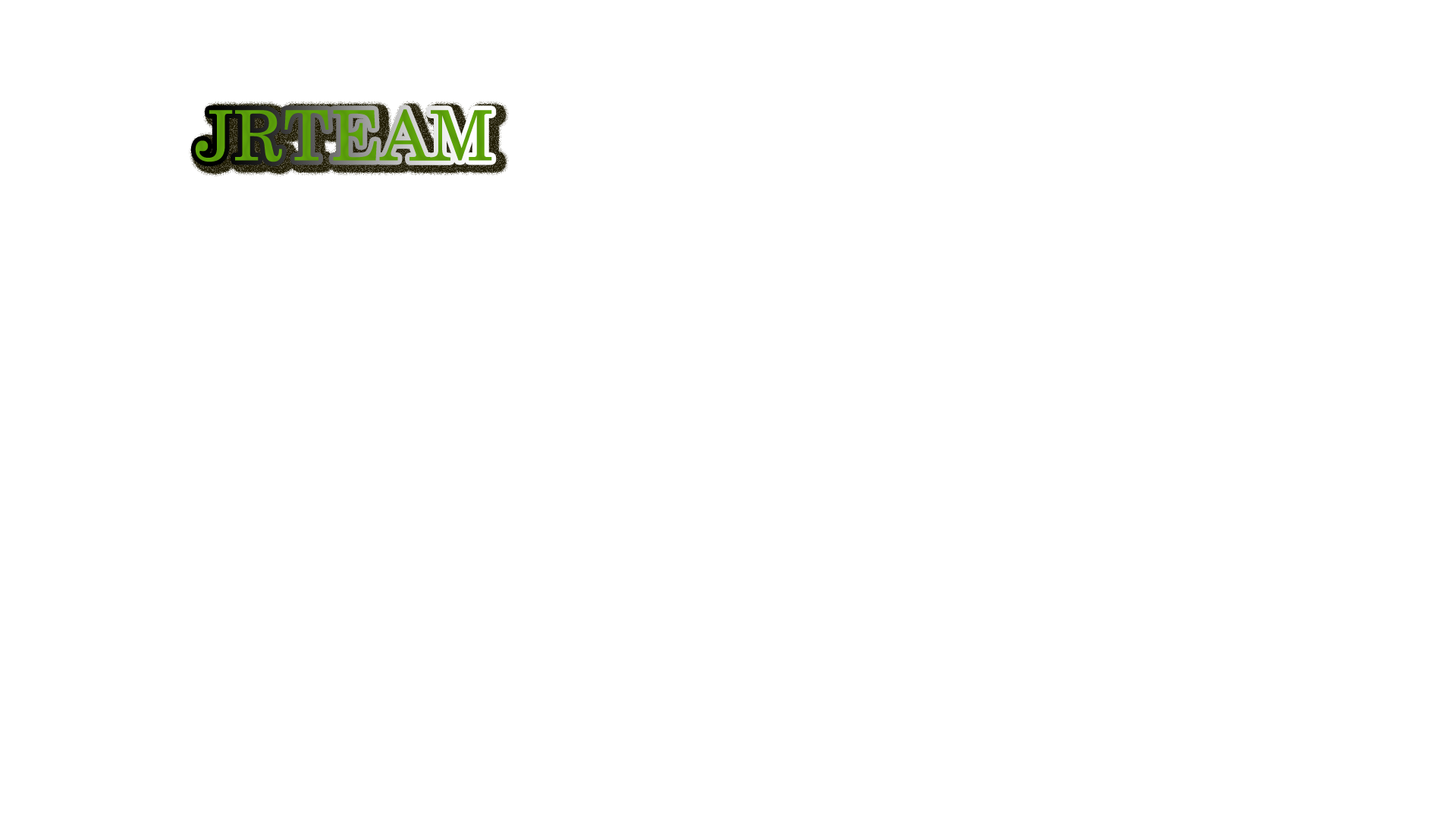
<style>
.page{position:relative;width:1456px;height:819px;background:#ffffff}
.page>*{position:absolute;margin:0}
.t1{font:69.3px "CenturySchlbkCyrillicBT-Roman";color:#5a9d0a}
</style>
<div class="page">
<p class="t1" style="left:195px;top:109px;width:297px;height:53px">JRTEAM</p>
</div>
